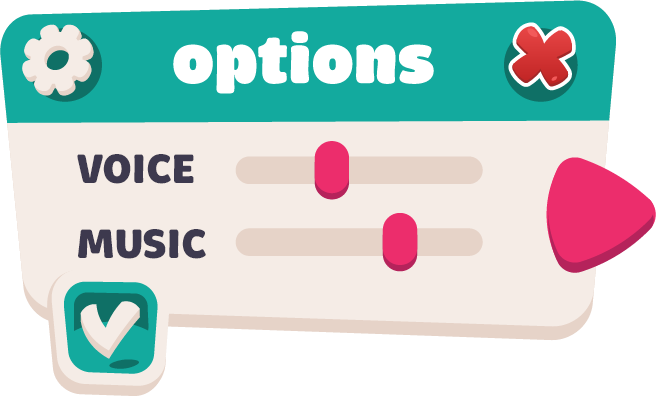
<style>
.page{position:relative;width:656px;height:396px;background:#f5ece6}
.page>*{position:absolute;margin:0}
.t1{font:42px "Brevia-Black";letter-spacing:-0.03em;color:#3d3a4f}
</style>
<div class="page">
<p class="t1" style="left:77px;top:154px;width:117px;height:30px">VOICE</p>
<p class="t1" style="left:78px;top:229px;width:128px;height:30px">MUSIC</p>
</div>
